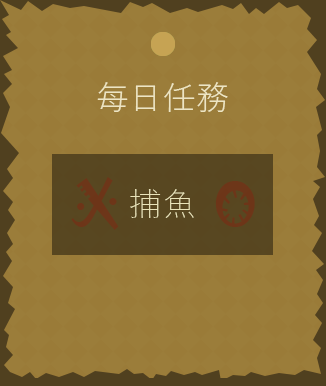
<style>
.page{position:relative;width:326px;height:386px;background:#9b7d3a}
.page>*{position:absolute;margin:0}
.t1{font:33.3px "YuGothicUI-Semilight";color:#ede5c3}
.t2{font:33.3px "YuGothicUI-Light";color:#e9e3b9}
</style>
<div class="page">
<p class="t1" style="left:97px;top:82px;width:131px;height:30px">每日任務</p>
<p class="t2" style="left:130px;top:189px;width:64px;height:29px">捕魚</p>
</div>
